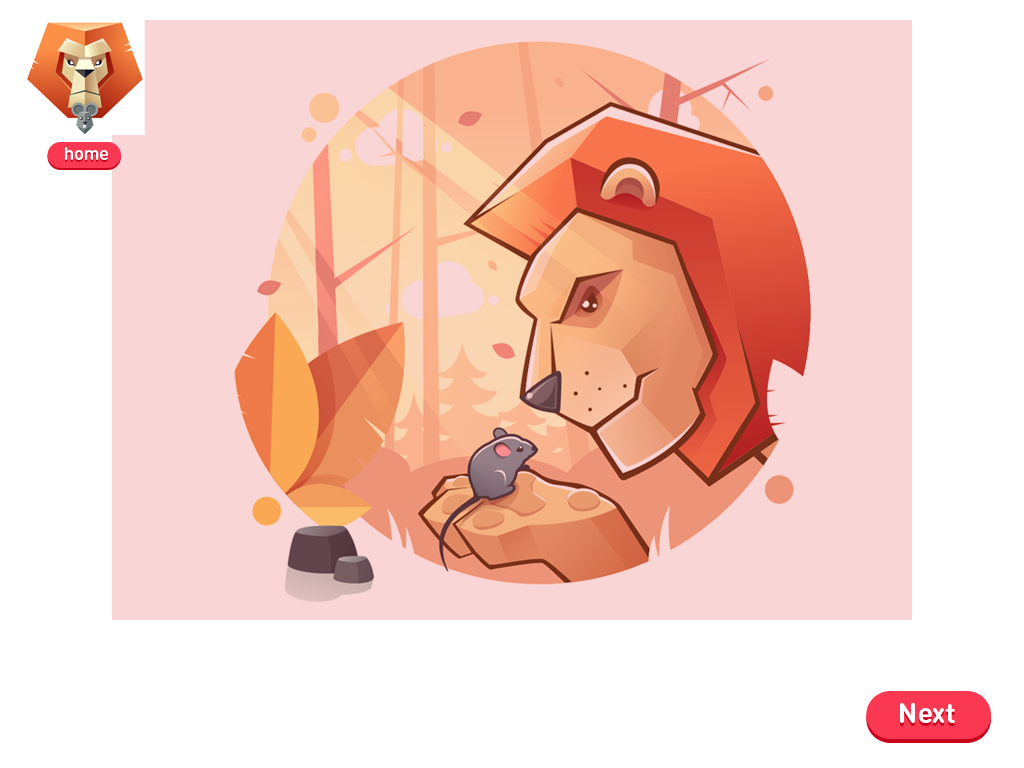
<style>
.page{position:relative;width:1024px;height:768px;background:#ffffff}
.page>*{position:absolute;margin:0}
.t1{font:18px "DINRoundPro-Bold";color:#ffffff}
.t2{font:28px "DINRoundPro-Bold";color:#ffffff}
</style>
<div class="page">
<p class="t1" style="left:65px;top:147px;width:43px;height:13px">home</p>
<p class="t2" style="left:900px;top:703px;width:55px;height:20px">Next</p>
</div>
